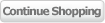
<style>
.page{position:relative;width:105px;height:23px}
.page>*{position:absolute;margin:0}
.t1{font:11px "Verdana-Bold";letter-spacing:-0.1em;color:#757575}
</style>
<div class="page">
<p class="t1" style="left:3px;top:6px;width:98px;height:12px">Continue Shopping</p>
</div>
